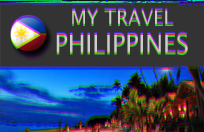
<style>
.page{position:relative;width:204px;height:132px;background:#333333}
.page>*{position:absolute;margin:0}
.t1{font:21.1px "LucidaSansUnicode";scale:0.89 1}
.t2{font:26.9px "LucidaSansUnicode";scale:0.89 1}
</style>
<div class="page">
<p class="t1" style="left:72px;top:7px;width:102px;height:16px">MY TRAVEL</p>
<p class="t2" style="left:56px;top:31px;width:132px;height:21px">PHILIPPINES</p>
</div>
